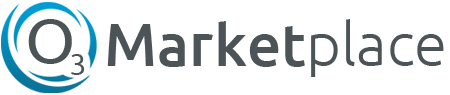
<style>
.page{position:relative;width:450px;height:95px;background:#ffffff}
.page>*{position:absolute;margin:0}
.t1{font:64.6px "Ubuntu";color:#4c5457;text-transform:uppercase}
.t2{font:60px "Ubuntu-Medium";color:#4c5457}
.t3{font:60px "Ubuntu-Light";color:#4c5457}
.t4{font:51.7px "Ubuntu";color:#4c5457;text-transform:uppercase}
</style>
<div class="page">
<p class="t1" style="left:28px;top:19px;width:44px;height:45px">O</p>
<p class="t2" style="left:107px;top:19px;width:337px;height:58px">Market<span class="t3">place</span></p>
<p class="t4" style="left:71px;top:54px;width:14px;height:21px">3</p>
</div>
